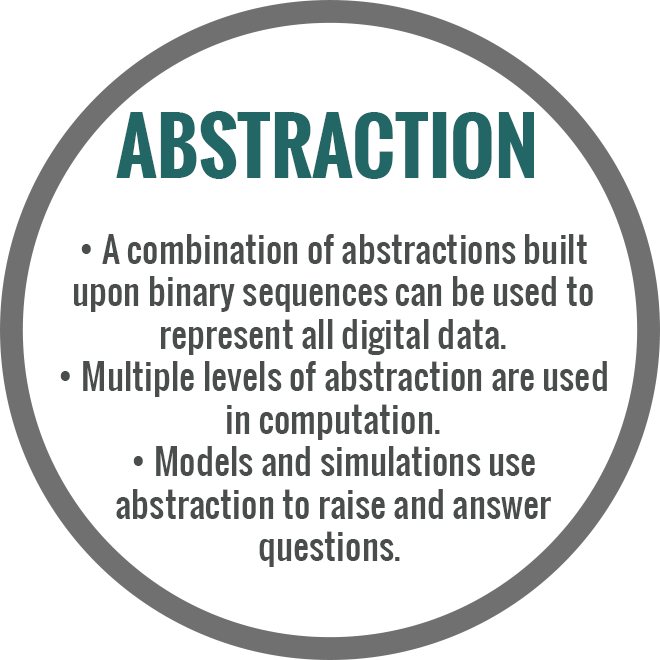
<style>
.page{position:relative;width:660px;height:660px;background:#ffffff}
.page>*{position:absolute;margin:0}
.t1{font:75px "Oswald-Bold";color:#236666}
.t2{font:35.4px "Oswald-Regular";color:#494d4c}
</style>
<div class="page">
<p class="t1" style="left:116px;top:111px;width:418px;height:68px">ABSTRACTION</p>
<p class="t2" style="left:60px;top:234px;width:547px;height:333px;text-align:center">• A combination of abstractions built<br>upon binary sequences can be used to<br>represent all digital data.<br>• Multiple levels of abstraction are used<br>in computation.<br>• Models and simulations use<br>abstraction to raise and answer<br>questions.</p>
</div>
